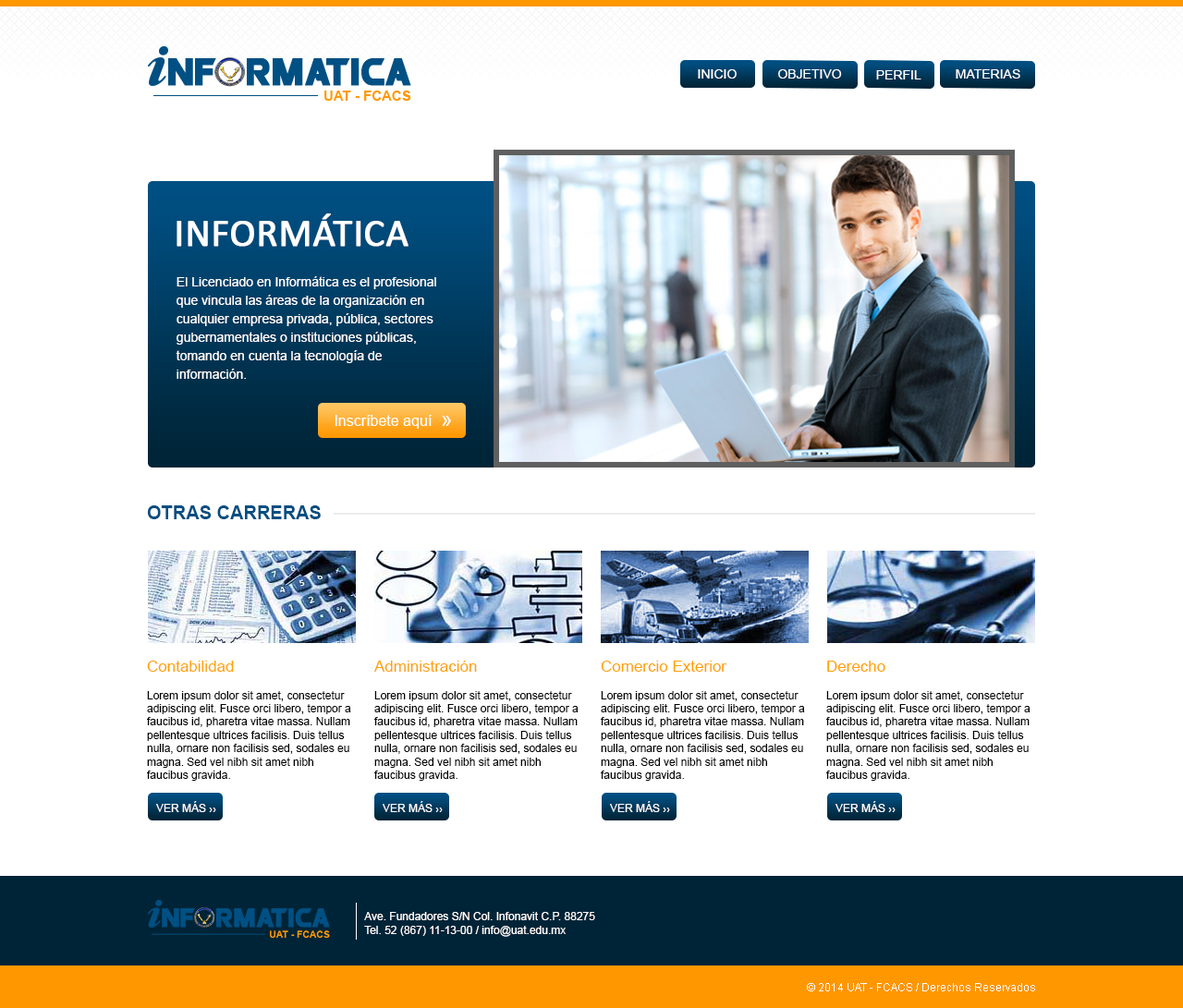
<style>
.page{position:relative;width:1183px;height:1008px;background:#ffffff}
.page>*{position:absolute;margin:0}
.t1{font:12.9px "ArialMT";color:#ffffff}
.t2{font:38.8px "Calibri";color:#ffffff;text-transform:uppercase;font-weight:bold}
.t3{font:12.9px/18.5px "ArialMT";color:#ffffff}
.t4{font:14.8px "ArialMT";color:#ffffff}
.t5{font:22.2px "ArialMT";letter-spacing:-0.16em;color:#ffffff}
.t6{font:18.5px "Arial-BoldMT";color:#004e81;text-transform:uppercase}
.t7{font:15.7px "ArialMT";color:#ffa200}
.t8{font:11.1px "ArialMT";color:#000000}
.t9{font:11.1px "ArialMT";color:#ffffff;text-transform:uppercase}
.t10{font:11.1px "ArialMT";color:#ffffff}
</style>
<div class="page">
<p class="t1" style="left:698px;top:69px;width:38px;height:10px">INICIO</p>
<p class="t1" style="left:778px;top:69px;width:64px;height:10px">OBJETIVO</p>
<p class="t1" style="left:876px;top:70px;width:45px;height:9px">PERFIL</p>
<p class="t1" style="left:955px;top:69px;width:65px;height:10px">MATERIAS</p>
<p class="t2" style="left:176px;top:213px;width:232px;height:34px">Informática</p>
<p class="t3" style="left:176px;top:276px;width:260px;height:103px">El Licenciado en Informática es el profesional que vincula las áreas de la organización en cualquier empresa privada, pública, sectores gubernamentales o instituciones públicas, tomando en cuenta la tecnología de información.</p>
<p class="t4" style="left:335px;top:415px;width:97px;height:14px">Inscríbete aquí</p>
<p class="t5" style="left:442px;top:416px;width:9px;height:10px">››</p>
<p class="t6" style="left:147px;top:505px;width:174px;height:14px">Otras Carreras</p>
<p class="t7" style="left:147px;top:661px;width:87px;height:11px">Contabilidad</p>
<p class="t7" style="left:374px;top:661px;width:103px;height:11px">Administración</p>
<p class="t7" style="left:601px;top:661px;width:126px;height:11px">Comercio Exterior</p>
<p class="t7" style="left:827px;top:661px;width:58px;height:11px">Derecho</p>
<p class="t8" style="left:147px;top:691px;width:204px;height:90px">Lorem ipsum dolor sit amet, consectetur adipiscing elit. Fusce orci libero, tempor a faucibus id, pharetra vitae massa. Nullam pellentesque ultrices facilisis. Duis tellus nulla, ornare non facilisis sed, sodales eu magna. Sed vel nibh sit amet nibh faucibus gravida.</p>
<p class="t8" style="left:374px;top:691px;width:204px;height:90px">Lorem ipsum dolor sit amet, consectetur adipiscing elit. Fusce orci libero, tempor a faucibus id, pharetra vitae massa. Nullam pellentesque ultrices facilisis. Duis tellus nulla, ornare non facilisis sed, sodales eu magna. Sed vel nibh sit amet nibh faucibus gravida.</p>
<p class="t8" style="left:601px;top:691px;width:204px;height:90px">Lorem ipsum dolor sit amet, consectetur adipiscing elit. Fusce orci libero, tempor a faucibus id, pharetra vitae massa. Nullam pellentesque ultrices facilisis. Duis tellus nulla, ornare non facilisis sed, sodales eu magna. Sed vel nibh sit amet nibh faucibus gravida.</p>
<p class="t8" style="left:826px;top:691px;width:204px;height:90px">Lorem ipsum dolor sit amet, consectetur adipiscing elit. Fusce orci libero, tempor a faucibus id, pharetra vitae massa. Nullam pellentesque ultrices facilisis. Duis tellus nulla, ornare non facilisis sed, sodales eu magna. Sed vel nibh sit amet nibh faucibus gravida.</p>
<p class="t9" style="left:156px;top:801px;width:60px;height:11px">Ver más ››</p>
<p class="t9" style="left:383px;top:801px;width:60px;height:11px">Ver más ››</p>
<p class="t9" style="left:610px;top:801px;width:60px;height:11px">Ver más ››</p>
<p class="t9" style="left:835px;top:801px;width:60px;height:11px">Ver más ››</p>
<p class="t10" style="left:364px;top:912px;width:231px;height:25px">Ave. Fundadores S/N Col. Infonavit C.P. 88275<br>Tel. 52 (867) 11-13-00 / info@uat.edu.mx</p>
<p class="t10" style="left:807px;top:983px;width:228px;height:9px">© 2014 UAT - FCACS / Derechos Reservados</p>
</div>
